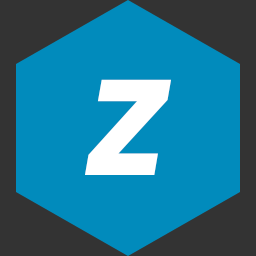
<style>
.page{position:relative;width:256px;height:256px;background:#018bbc}
.page>*{position:absolute;margin:0}
.t1{font:135px "Poppins-ExtraBoldItalic";color:#ffffff}
</style>
<div class="page">
<p class="t1" style="left:85px;top:79px;width:86px;height:96px">Z</p>
</div>
